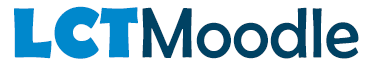
<style>
.page{position:relative;width:370px;height:65px;background:#ffffff}
.page>*{position:absolute;margin:0}
.t1{font:72px "BerlinSansFB-Reg";color:#004263}
.t2{font:72px "BerlinSansFB-Bold";color:#0088cc}
</style>
<div class="page">
<p class="t1" style="left:14px;top:6px;width:345px;height:53px"><span class="t2">LCT</span>Moodle</p>
</div>
